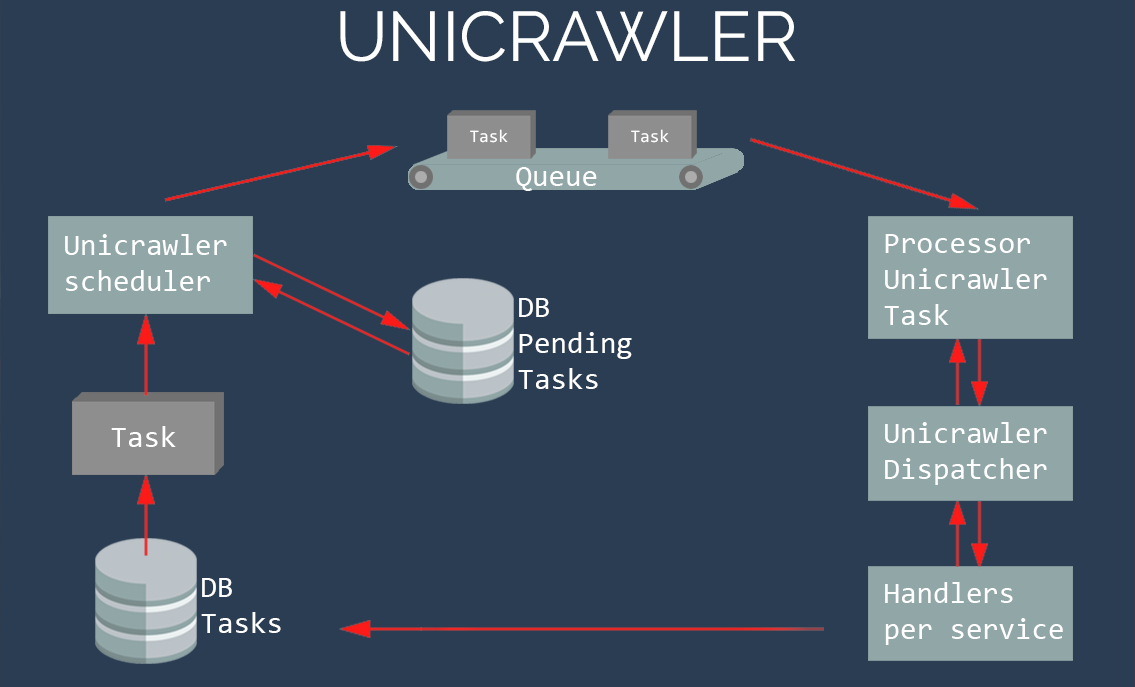
<style>
.page{position:relative;width:1135px;height:687px;background:#2a3d52}
.page>*{position:absolute;margin:0}
.t1{font:70px "Raleway-Regular";color:#ffffff}
.t2{font:17.7px "Consolas";color:#ffffff}
.t3{font:30px "Consolas";color:#ffffff}
</style>
<div class="page">
<p class="t1" style="left:340px;top:11px;width:455px;height:51px">UNICRAWLER</p>
<p class="t2" style="left:470px;top:129px;width:38px;height:14px">Task</p>
<p class="t2" style="left:631px;top:129px;width:38px;height:14px">Task</p>
<p class="t3" style="left:516px;top:167px;width:81px;height:24px">Queue</p>
<p class="t3" style="left:65px;top:234px;width:162px;height:57px">Unicrawler scheduler</p>
<p class="t3" style="left:884px;top:234px;width:163px;height:91px">Processor <br>Unicrawler<br>Task</p>
<p class="t3" style="left:518px;top:298px;width:114px;height:91px">DB <br>Pending Tasks</p>
<p class="t3" style="left:885px;top:422px;width:162px;height:63px">Unicrawler<br>Dispatcher</p>
<p class="t3" style="left:111px;top:426px;width:65px;height:21px">Task</p>
<p class="t3" style="left:201px;top:578px;width:80px;height:55px">DB <br>Tasks</p>
<p class="t3" style="left:885px;top:582px;width:178px;height:63px">Handlers<br>per service</p>
</div>
